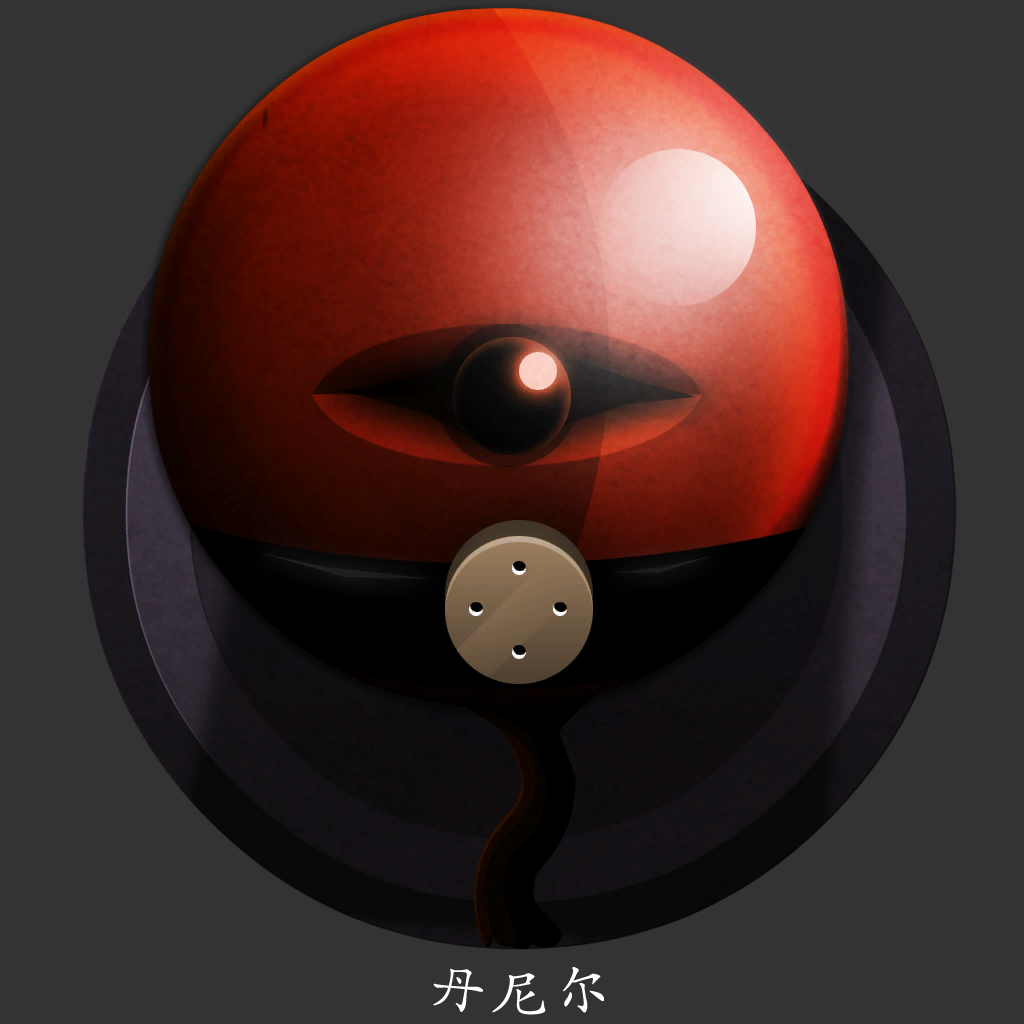
<style>
.page{position:relative;width:1024px;height:1024px;background:#333333}
.page>*{position:absolute;margin:0}
.t1{font:53.3px "STKaiti";letter-spacing:0.1em;color:#ffffff}
</style>
<div class="page">
<p class="t1" style="left:433px;top:967px;width:171px;height:48px">丹尼尔</p>
</div>
